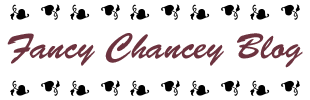
<style>
.page{position:relative;width:310px;height:100px;background:#ffffff}
.page>*{position:absolute;margin:0}
.t1{font:36px "BrushScriptStd";color:#6d333f}
</style>
<div class="page">
<p class="t1" style="left:7px;top:33px;width:296px;height:35px">Fancy Chancey Blog</p>
</div>
